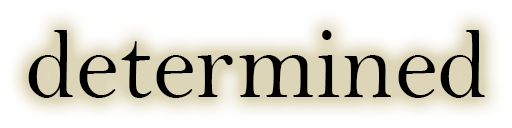
<style>
.page{position:relative;width:512px;height:128px;background:#ffffff}
.page>*{position:absolute;margin:0}
.t1{font:100px "BellMT";color:#000000}
</style>
<div class="page">
<p class="t1" style="left:28px;top:30px;width:457px;height:68px">determined</p>
</div>
